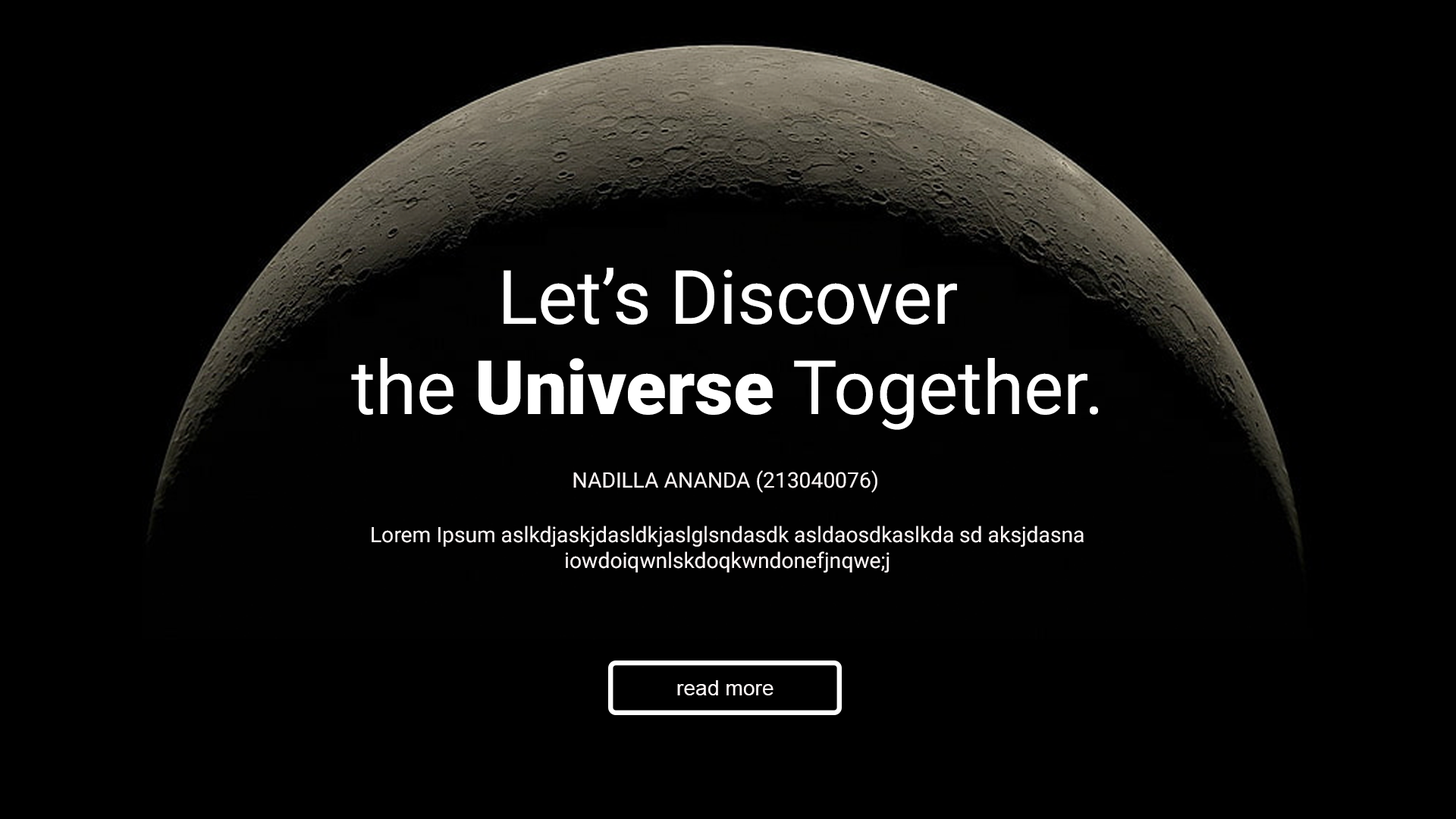
<style>
.page{position:relative;width:1456px;height:819px;background:#000000}
.page>*{position:absolute;margin:0}
.t1{font:74.9px "Roboto-Regular";color:#ffffff}
.t2{font:74.9px "Roboto-Black";color:#ffffff}
.t3{font:21.4px "Roboto-Regular";color:#fbf5f5}
.t4{font:21.4px "ArialMT";color:#fbf5f5}
</style>
<div class="page">
<p class="t1" style="left:351px;top:268px;width:747px;height:162px;text-align:center">Let’s Discover<br>the <span class="t2">Universe </span>Together.</p>
<p class="t3" style="left:573px;top:470px;width:304px;height:23px">NADILLA ANANDA (213040076)</p>
<p class="t3" style="left:372px;top:526px;width:712px;height:47px;text-align:center">Lorem Ipsum aslkdjaskjdasldkjaslglsndasdk asldaosdkaslkda sd aksjdasna<br>iowdoiqwnlskdoqkwndonefjnqwe;j</p>
<p class="t4" style="left:677px;top:680px;width:96px;height:15px">read more</p>
</div>
